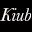
<style>
.page{position:relative;width:32px;height:32px;background:#000000}
.page>*{position:absolute;margin:0}
.t1{font:18.8px "Baskerville-Italic";color:#fffaf5}
</style>
<div class="page">
<p class="t1" style="left:0px;top:8px;width:31px;height:13px">Kiub</p>
</div>
